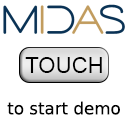
<style>
.page{position:relative;width:128px;height:128px;background:#ffffff}
.page>*{position:absolute;margin:0}
.t1{font:22.2px "ArialMT";color:#000000}
.t2{font:16.7px "BitstreamVeraSans-Roman";color:#000000}
</style>
<div class="page">
<p class="t1" style="left:25px;top:57px;width:77px;height:16px">TOUCH</p>
<p class="t2" style="left:7px;top:101px;width:113px;height:14px">to start demo</p>
</div>
